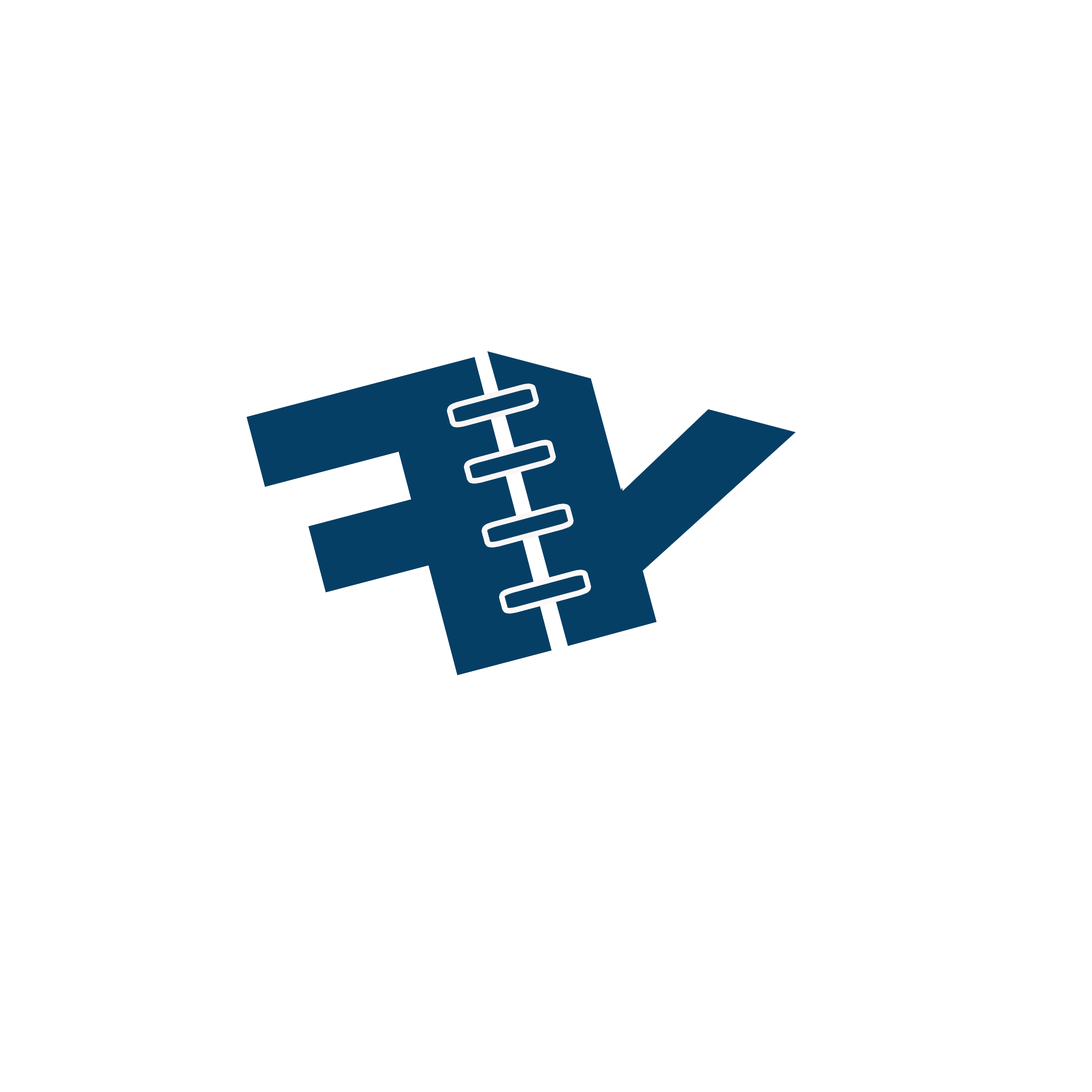
<style>
.page{position:relative;width:1092px;height:1092px;background:#ffffff}
.page>*{position:absolute;margin:0}
.t1{font:455px "FranklinGothic-Heavy";letter-spacing:0.02em;color:#063f65;scale:1.07 1}
</style>
<div class="page">
<p class="t1" style="left:247px;top:357px;width:305px;height:318px;rotate:165deg">F</p>
</div>
